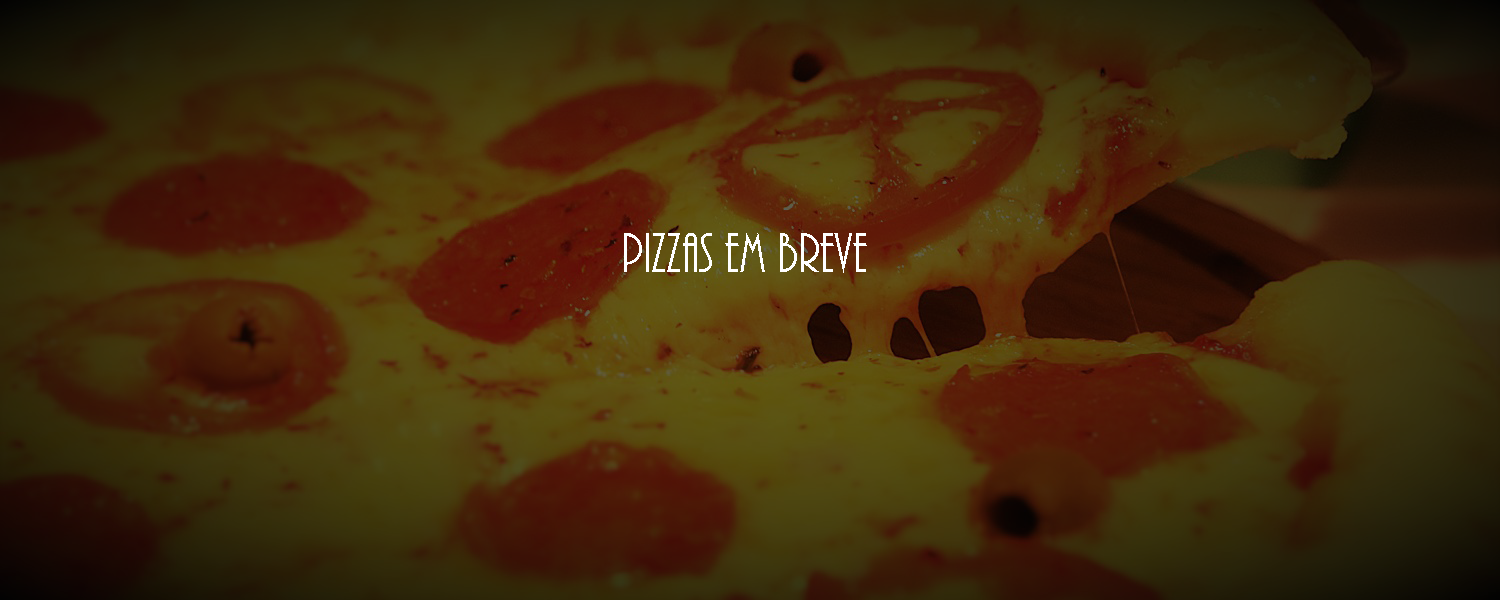
<style>
.page{position:relative;width:1500px;height:600px}
.page>*{position:absolute;margin:0}
.t1{font:57.6px "ARBONNIE";color:#ffffff}
</style>
<div class="page">
<p class="t1" style="left:624px;top:233px;width:243px;height:40px">PIZZAS eM BREVE</p>
</div>
